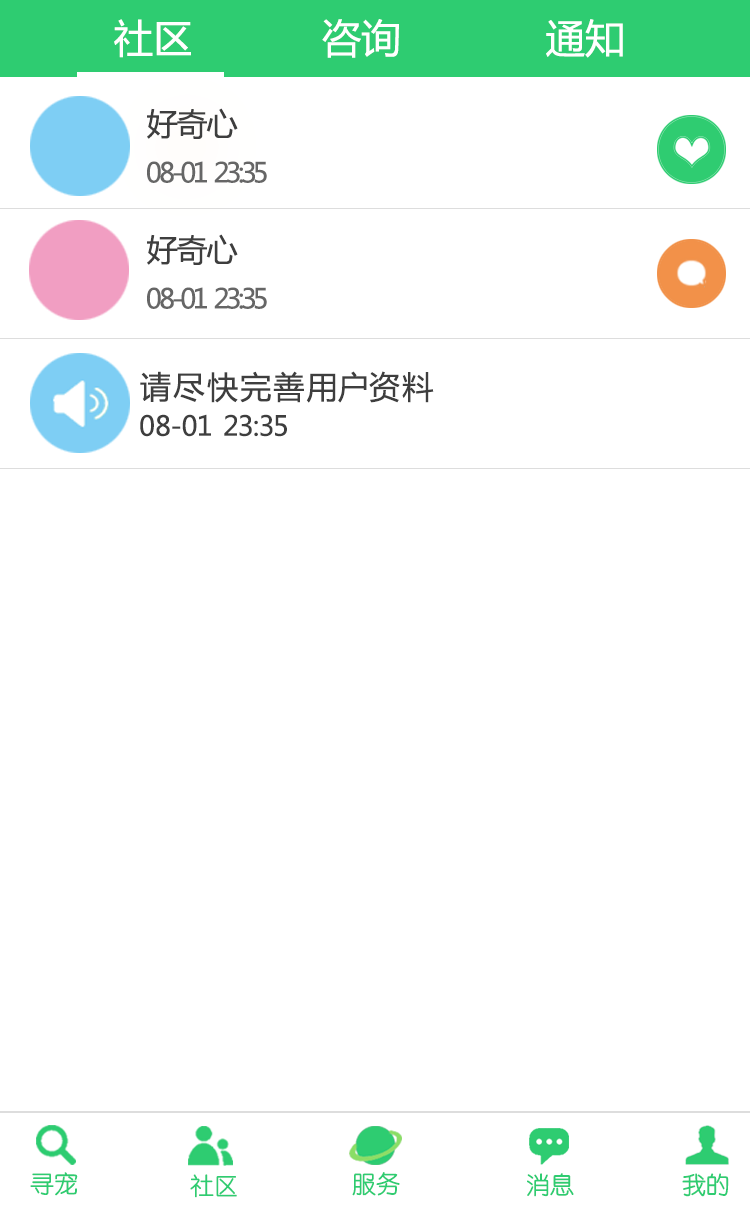
<style>
.page{position:relative;width:750px;height:1206px;background:#ffffff}
.page>*{position:absolute;margin:0}
.t1{font:39.6px "MicrosoftYaHei";color:#ffffff}
.t2{font:27.1px/51px "MicrosoftYaHei";color:#666666}
.t3{font:31.2px/51px "MicrosoftYaHei";color:#3e3e3e}
.t4{font:27.1px/30.2px "MicrosoftYaHei";letter-spacing:0.1em;color:#3e3e3e}
.t5{font:31.2px/30.2px "MicrosoftYaHei";letter-spacing:0.1em;color:#3e3e3e}
.t6{font:24px "STYuanti-SC-Regular";color:#2ecc71}
.t7{font:24px "STYuanti-SC-Regular"}
</style>
<div class="page">
<p class="t1" style="left:114px;top:19px;width:509px;height:39px">社区           咨询           通知</p>
<p class="t2" style="left:147px;top:108px;width:120px;height:75px"><span class="t3">好奇心<br></span>08-01 23:35</p>
<p class="t2" style="left:147px;top:234px;width:120px;height:75px"><span class="t3">好奇心<br></span>08-01 23:35</p>
<p class="t4" style="left:140px;top:371px;width:294px;height:66px"><span class="t5">请尽快完善用户资料<br></span>08-01 23:35</p>
<p class="t6" style="left:30px;top:1172px;width:48px;height:24px">寻宠</p>
<p class="t6" style="left:190px;top:1174px;width:47px;height:24px">社区</p>
<p class="t7" style="left:352px;top:1173px;width:48px;height:24px">服务</p>
<p class="t6" style="left:352px;top:1172px;width:48px;height:24px">服务</p>
<p class="t7" style="left:526px;top:1173px;width:47px;height:24px">消息</p>
<p class="t6" style="left:527px;top:1173px;width:47px;height:24px">消息</p>
<p class="t6" style="left:682px;top:1173px;width:47px;height:24px">我的</p>
<p class="t6" style="left:682px;top:1173px;width:47px;height:24px">我的</p>
</div>
